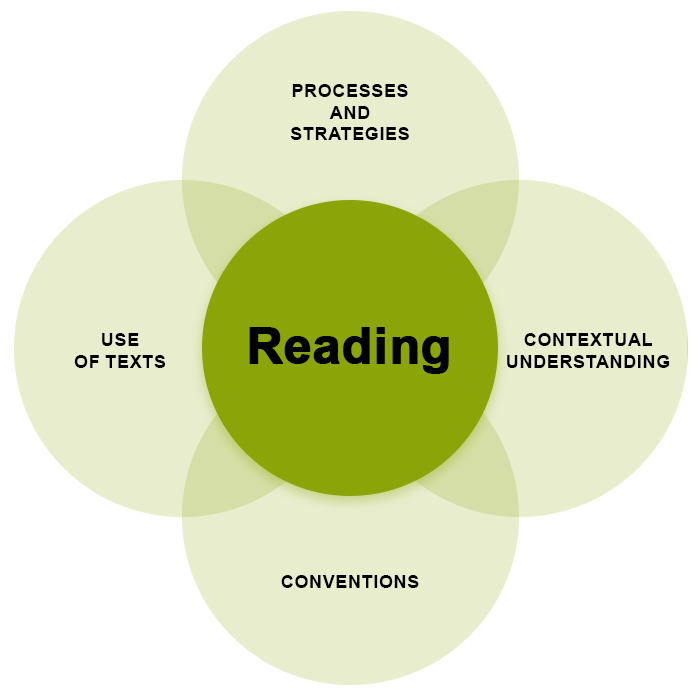
<style>
.page{position:relative;width:700px;height:700px;background:#ffffff}
.page>*{position:absolute;margin:0}
.t1{font:18px "Arial-BoldMT";color:#000000;text-transform:uppercase}
.t2{font:50px "Arial-BoldMT";color:#000000;font-weight:bold}
</style>
<div class="page">
<p class="t1" style="left:290px;top:84px;width:119px;height:56px;text-align:center">Processes<br>and<br>Strategies</p>
<p class="t2" style="left:249px;top:327px;width:200px;height:47px">Reading</p>
<p class="t2" style="left:251px;top:327px;width:199px;height:47px">Literacy</p>
<p class="t1" style="left:74px;top:333px;width:92px;height:35px;text-align:center">Use<br>of Texts</p>
<p class="t1" style="left:507px;top:333px;width:163px;height:35px;text-align:center">Contextual<br>Understanding</p>
<p class="t1" style="left:281px;top:575px;width:138px;height:13px">Conventions</p>
</div>
